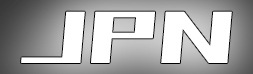
<style>
.page{position:relative;width:253px;height:74px;background:#ffffff}
.page>*{position:absolute;margin:0}
.t1{font:90px "851Gkktt";color:#ffffff}
</style>
<div class="page">
<p class="t1" style="left:21px;top:11px;width:211px;height:52px">JPN</p>
</div>
